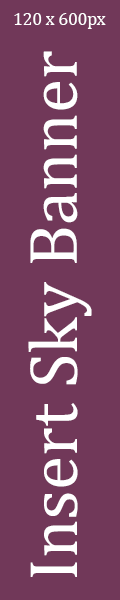
<style>
.page{position:relative;width:120px;height:600px;background:#713859}
.page>*{position:absolute;margin:0}
.t1{font:17.5px "CambriaMath";color:#ffffff}
.t2{font:69.5px "CambriaMath";color:#ffffff}
</style>
<div class="page">
<p class="t1" style="left:14px;top:13px;width:92px;height:16px">120 x 600px</p>
<p class="t2" style="left:28px;top:51px;width:64px;height:526px;rotate:-90deg">Insert Sky Banner</p>
</div>
